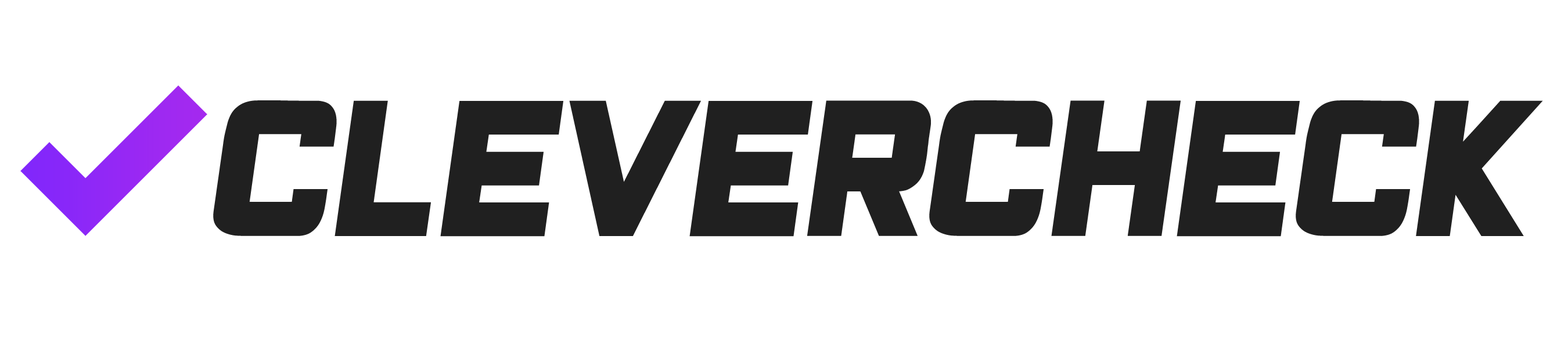
<style>
.page{position:relative;width:1568px;height:348px;background:#ffffff}
.page>*{position:absolute;margin:0}
.t1{font:193.6px "Closeness-BoldItalic";letter-spacing:0.01em;color:#202020}
</style>
<div class="page">
<p class="t1" style="left:213px;top:100px;width:1330px;height:137px">CLEVERCHECK</p>
</div>
